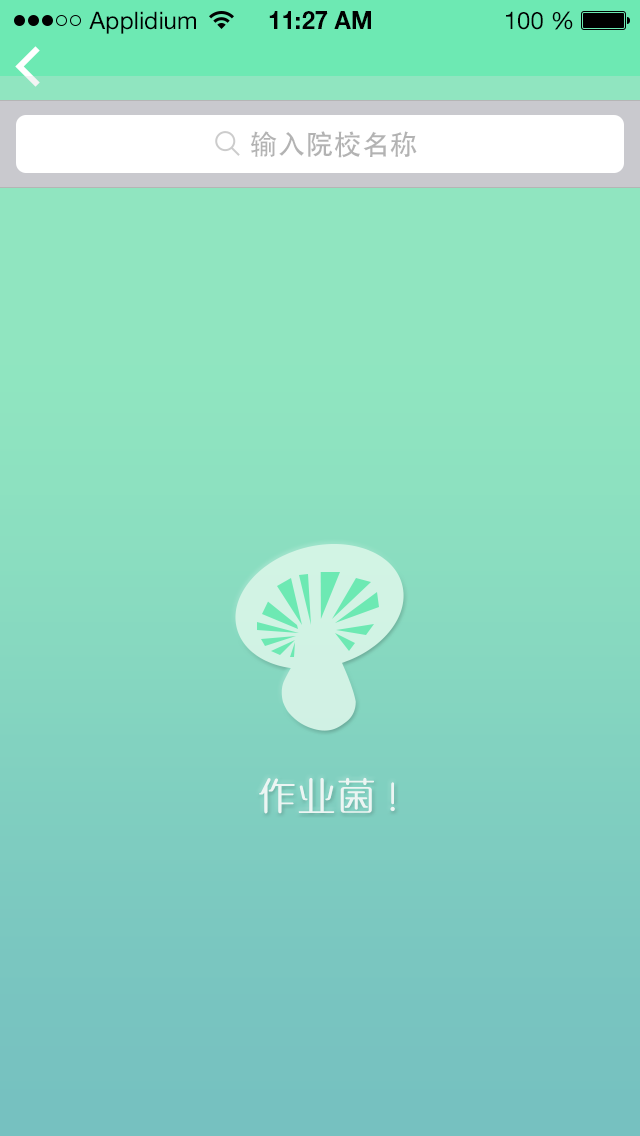
<style>
.page{position:relative;width:640px;height:1136px}
.page>*{position:absolute;margin:0}
.t1{font:24px "HelveticaNeueLTStd-Roman";color:#000000}
.t2{font:24px "HelveticaNeueLTStd-Bd";color:#000000}
.t3{font:28px "AdobeHeitiStd-Regular";color:#b3b3b3}
.t4{font:36px "MFYaYuan_Noncommercial-Regular";letter-spacing:0.1em;color:#fbfbfb}
</style>
<div class="page">
<p class="t1" style="left:89px;top:11px;width:107px;height:23px">Applidium</p>
<p class="t2" style="left:269px;top:11px;width:102px;height:18px">11:27 AM</p>
<p class="t1" style="left:506px;top:11px;width:67px;height:19px">100 %</p>
<p class="t3" style="left:251px;top:131px;width:166px;height:27px">输入院校名称</p>
<p class="t4" style="left:259px;top:777px;width:136px;height:37px;opacity:0.86">作业菌 !</p>
</div>
